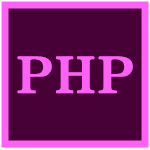
<style>
.page{position:relative;width:150px;height:150px;background:#470137}
.page>*{position:absolute;margin:0}
.t1{font:48px "HGPMinchoE";letter-spacing:0.03em;color:#ff61f6;font-weight:bold}
</style>
<div class="page">
<p class="t1" style="left:17px;top:56px;width:116px;height:38px">ＰＨＰ</p>
</div>
